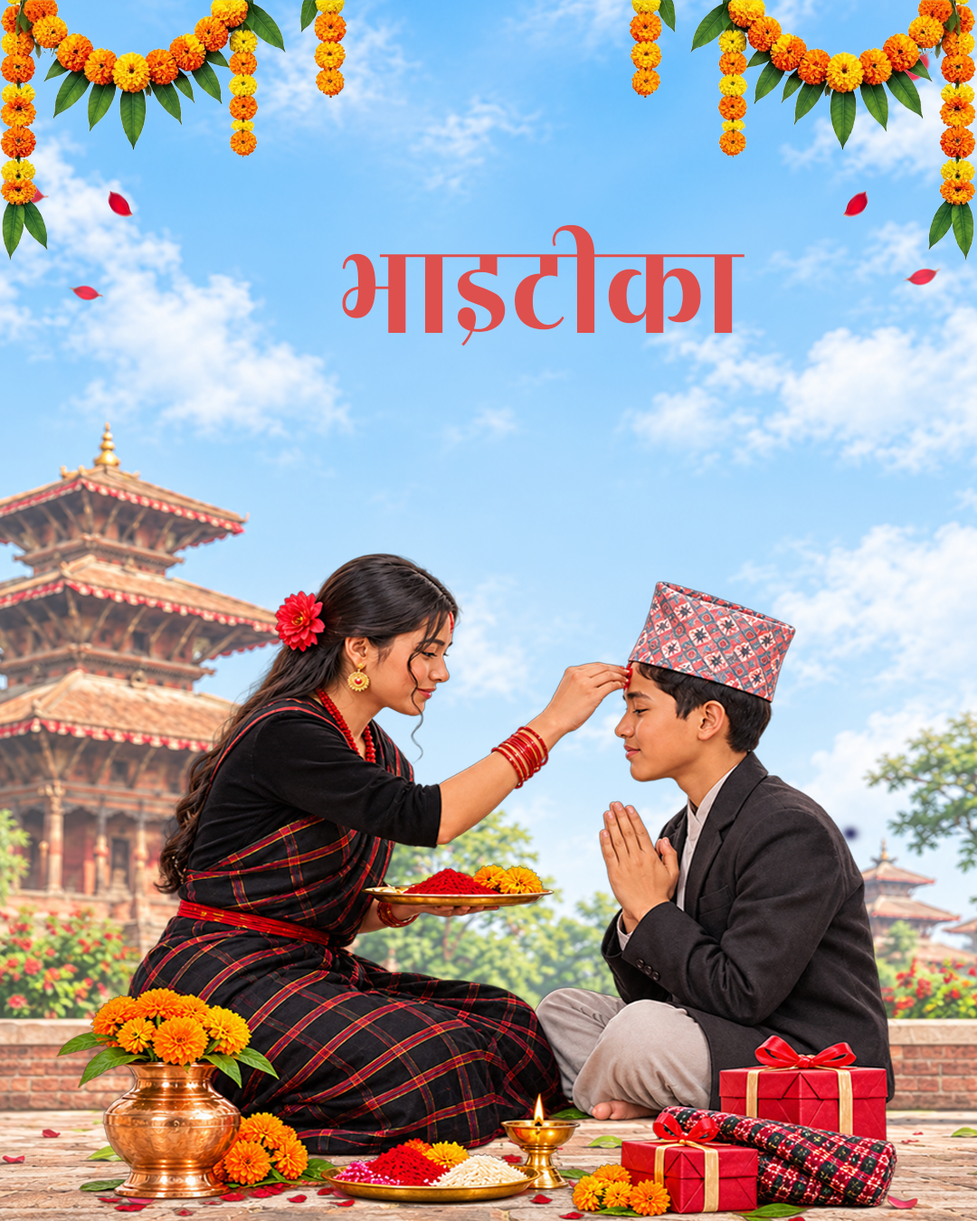
<style>
.page{position:relative;width:977px;height:1221px}
.page>*{position:absolute;margin:0}
.t1{font:140.2px "RozhaOne-Regular";color:#de504d;scale:0.88 1}
</style>
<div class="page">
<p class="t1" style="left:342px;top:224px;width:402px;height:122px">भाइटीका</p>
</div>
